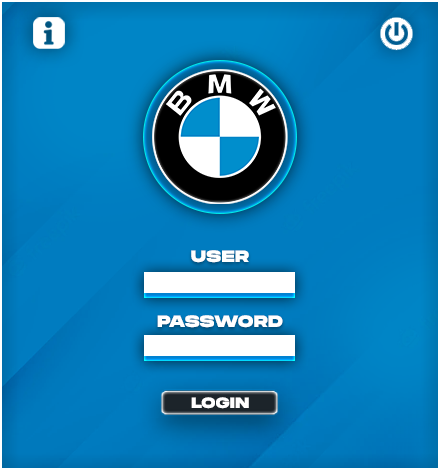
<style>
.page{position:relative;width:440px;height:470px}
.page>*{position:absolute;margin:0}
.t1{font:16.5px "Phonk-RegularDEMO";color:#ffffff}
.t2{font:14.9px "Phonk-RegularDEMO";color:#ffffff}
</style>
<div class="page">
<p class="t1" style="left:191px;top:250px;width:58px;height:13px">USER</p>
<p class="t1" style="left:157px;top:315px;width:126px;height:13px">PASSWORD</p>
<p class="t2" style="left:191px;top:397px;width:58px;height:12px">LOGIN</p>
</div>
